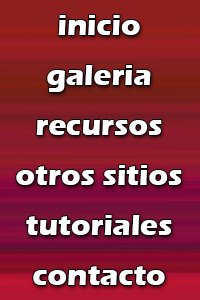
<style>
.page{position:relative;width:200px;height:300px}
.page>*{position:absolute;margin:0}
.t1{font:30px/50px "ErasITC-Bold";color:#000000}
</style>
<div class="page">
<p class="t1" style="left:16px;top:15px;width:166px;height:270px;text-align:center">inicio<br>galeria<br>recursos<br>otros sitios<br>tutoriales<br>contacto</p>
</div>
